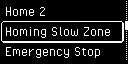
<style>
.page{position:relative;width:128px;height:64px;background:#000000}
.page>*{position:absolute;margin:0}
.t1{font:16px "PixelOperator";color:#ffffff}
</style>
<div class="page">
<p class="t1" style="left:5px;top:7px;width:40px;height:9px">Home 2</p>
<p class="t1" style="left:5px;top:27px;width:105px;height:11px">Homing Slow Zone</p>
<p class="t1" style="left:6px;top:47px;width:95px;height:11px">Emergency Stop</p>
</div>
